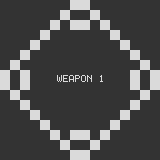
<style>
.page{position:relative;width:160px;height:160px;background:#333333}
.page>*{position:absolute;margin:0}
.t1{font:8px "Terminal";color:#dadada}
</style>
<div class="page">
<p class="t1" style="left:57px;top:75px;width:46px;height:7px">WEAPON 1</p>
</div>
